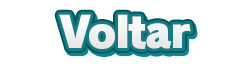
<style>
.page{position:relative;width:250px;height:64px;background:#ffffff}
.page>*{position:absolute;margin:0}
.t1{font:42.7px "RodinPro-UB";letter-spacing:-0.042em;color:#f1f2f2}
</style>
<div class="page">
<p class="t1" style="left:59px;top:14px;width:132px;height:35px">Voltar</p>
</div>
